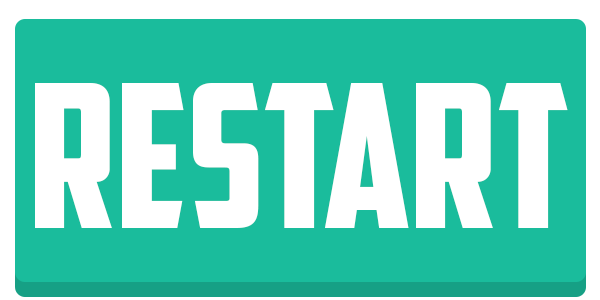
<style>
.page{position:relative;width:600px;height:300px;background:#1abc9c}
.page>*{position:absolute;margin:0}
.t1{font:200px "AmericanCaptain";color:#ffffff}
</style>
<div class="page">
<p class="t1" style="left:35px;top:83px;width:533px;height:145px">RESTART</p>
</div>
